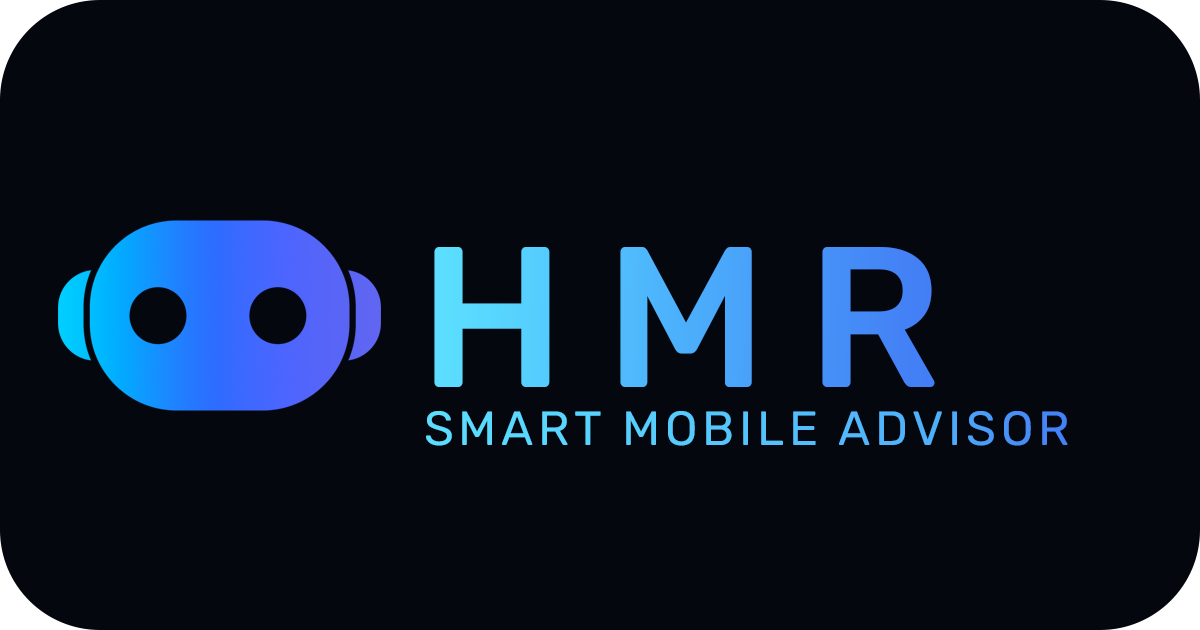
<style>
.page{position:relative;width:1200px;height:630px;background:#05070f}
.page>*{position:absolute;margin:0}
.t1{font:200px "Rubik-Medium";letter-spacing:0.2em}
.t2{font:48px "Rubik-Regular";letter-spacing:0.1em}
</style>
<div class="page">
<p class="t1" style="left:434px;top:247px;width:501px;height:140px">HMR</p>
<p class="t2" style="left:426px;top:411px;width:642px;height:35px">SMART MOBILE ADVISOR</p>
</div>
